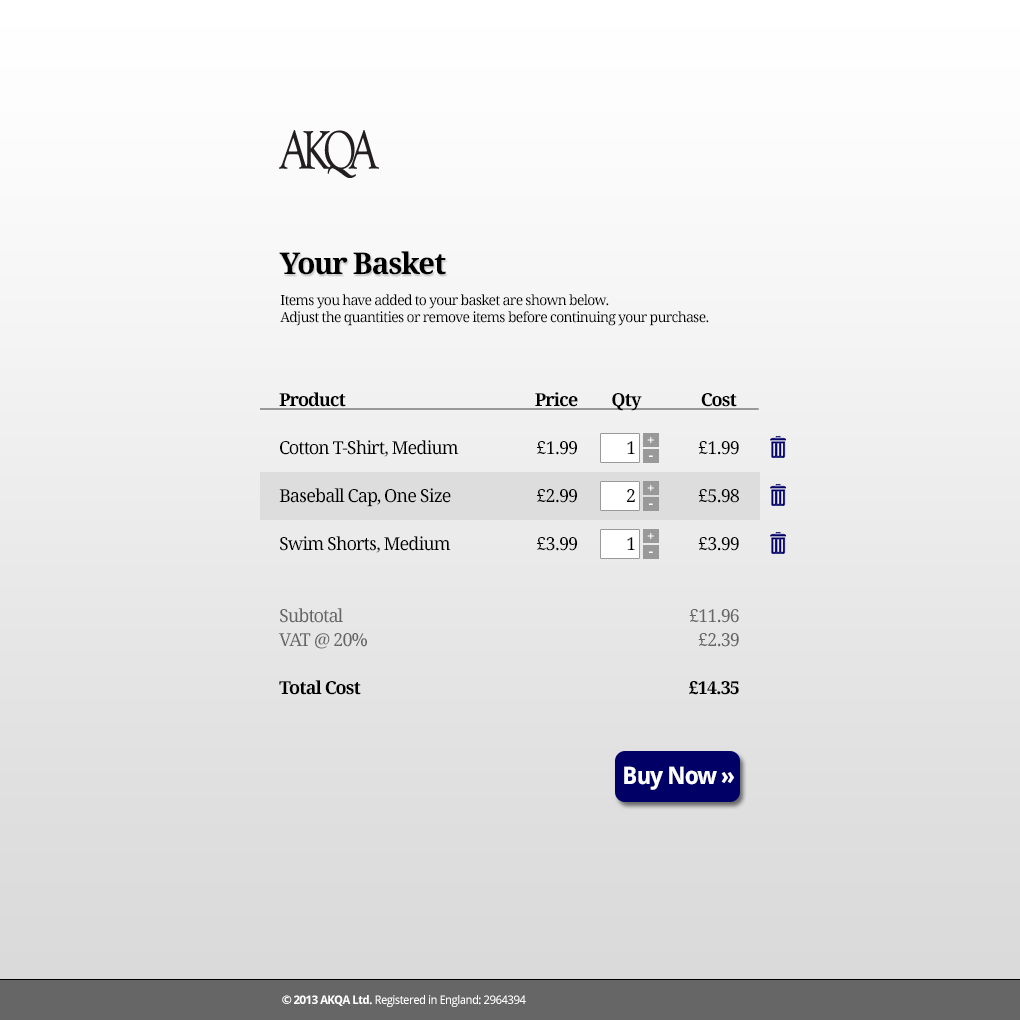
<style>
.page{position:relative;width:1020px;height:1020px}
.page>*{position:absolute;margin:0}
.t1{font:30px "DroidSerif-Bold";letter-spacing:-0.05em;color:#000000}
.t2{font:14px "DroidSerif";letter-spacing:-0.05em;color:#000000}
.t3{font:18px/48px "DroidSerif";letter-spacing:-0.05em;color:#000000}
.t4{font:18px/48px "DroidSerif-Bold";letter-spacing:-0.05em;color:#000000;text-decoration:underline}
.t5{font:18px/24px "DroidSerif";letter-spacing:-0.05em;color:#666666}
.t6{font:18px/48px "DroidSerif-Bold";letter-spacing:-0.05em;color:#000000}
.t7{font:14px "DroidSerif-Bold";letter-spacing:-0.05em;color:#ffffff}
.t8{font:18px "DroidSerif";letter-spacing:-0.05em;color:#000000}
.t9{font:24px "DroidSans-Bold";letter-spacing:-0.05em;color:#ffffff}
.t10{font:12px "DroidSans";letter-spacing:-0.05em;color:#ffffff}
.t11{font:12px "DroidSans-Bold";letter-spacing:-0.05em;color:#ffffff}
</style>
<div class="page">
<p class="t1" style="left:279px;top:251px;width:167px;height:24px">Your Basket</p>
<p class="t2" style="left:280px;top:294px;width:429px;height:32px">Items you have added to your basket are shown below.<br>Adjust the quantities or remove items before continuing your purchase.</p>
<p class="t3" style="left:260px;top:392px;width:499px;height:303px"><span class="t4">     Product            Price         Qty                Cost      <br></span>     Cotton T-Shirt, Medium <br>     Baseball Cap, One Size<br>     Swim Shorts, Medium<br><br><span class="t5">     Subtotal<br>     VAT @ 20%<br></span><span class="t6">     Total Cost</span></p>
<p class="t7" style="left:647px;top:437px;width:7px;height:6px">+</p>
<p class="t3" style="left:537px;top:441px;width:202px;height:254px;text-align:right">£1.99                                £1.99<br>£2.99                                £5.98<br>£3.99                                £3.99<br><br><span class="t5">£11.96<br>£2.39<br></span><span class="t6">£14.35</span></p>
<p class="t8" style="left:627px;top:441px;width:8px;height:13px">1</p>
<p class="t7" style="left:649px;top:455px;width:4px;height:2px">-</p>
<p class="t7" style="left:647px;top:485px;width:7px;height:6px">+</p>
<p class="t8" style="left:627px;top:489px;width:8px;height:13px">2</p>
<p class="t7" style="left:649px;top:503px;width:4px;height:2px">-</p>
<p class="t7" style="left:647px;top:533px;width:7px;height:6px">+</p>
<p class="t8" style="left:627px;top:537px;width:8px;height:13px">1</p>
<p class="t7" style="left:649px;top:551px;width:4px;height:2px">-</p>
<p class="t9" style="left:624px;top:766px;width:110px;height:24px">Buy Now »</p>
<p class="t10" style="left:282px;top:995px;width:244px;height:12px"><span class="t11">© 2013 AKQA Ltd. </span>Registered in England: 2964394</p>
</div>
